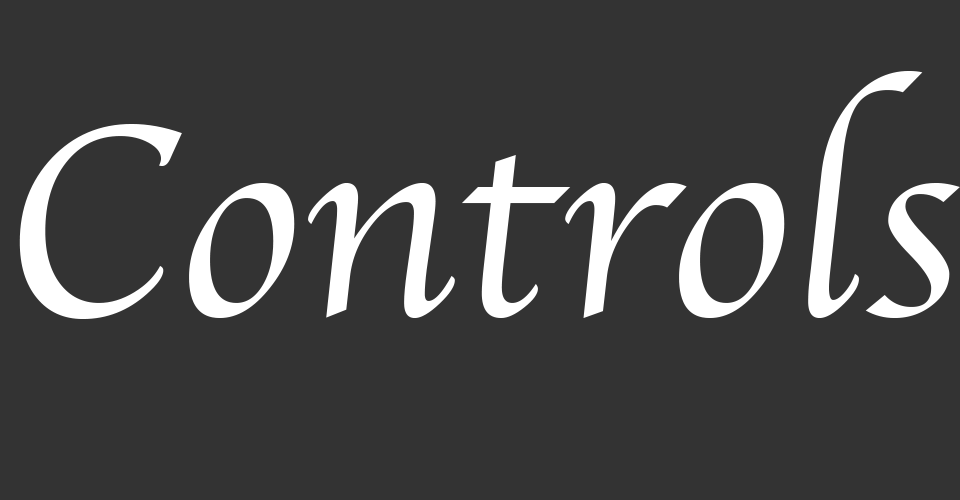
<style>
.page{position:relative;width:960px;height:500px;background:#333333}
.page>*{position:absolute;margin:0}
.t1{font:281.1px "Apple-Chancery";color:#ffffff}
</style>
<div class="page">
<p class="t1" style="left:19px;top:71px;width:941px;height:248px">Controls</p>
</div>
